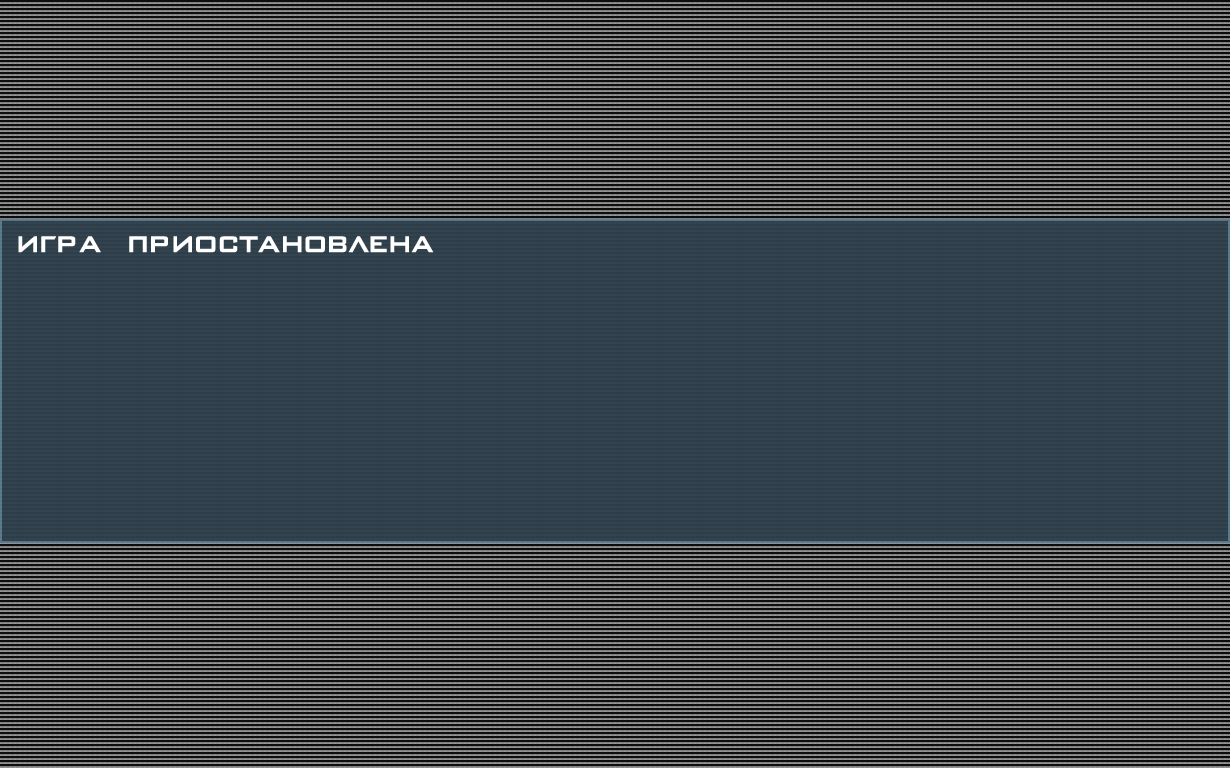
<style>
.page{position:relative;width:1230px;height:768px;background:#32434e}
.page>*{position:absolute;margin:0}
.t1{font:30px "BankGothicRUSSMedium";letter-spacing:-0.025em;color:#ffffff;font-weight:bold}
</style>
<div class="page">
<p class="t1" style="left:18px;top:236px;width:416px;height:17px">Игра приостановлена</p>
</div>
